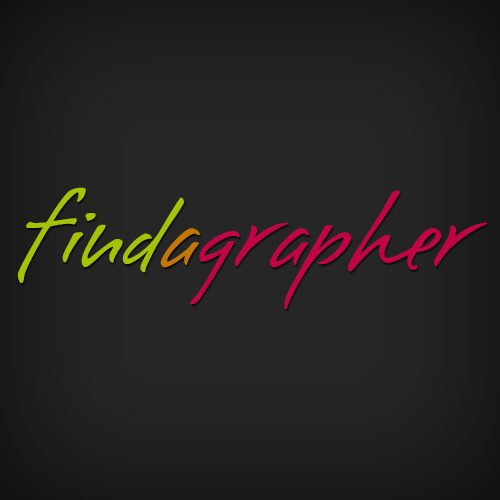
<style>
.page{position:relative;width:500px;height:500px;background:#262626}
.page>*{position:absolute;margin:0}
.t1{font:145.2px "BrisaAlternates";letter-spacing:-0.01em;color:#c30347}
.t2{font:145.2px "BrisaAlternates";letter-spacing:-0.01em;color:#a6c303}
.t3{font:145.2px "BrisaAlternates";letter-spacing:-0.01em;color:#c37803}
</style>
<div class="page">
<p class="t1" style="left:18px;top:187px;width:469px;height:122px"><span class="t2">find</span><span class="t3">a</span>grapher</p>
</div>
